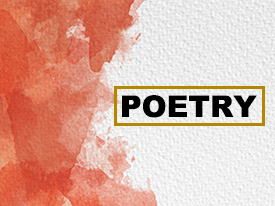
<style>
.page{position:relative;width:275px;height:206px}
.page>*{position:absolute;margin:0}
.t1{font:30px "Arial-Black";color:#000000}
</style>
<div class="page">
<p class="t1" style="left:122px;top:95px;width:135px;height:23px">POETRY</p>
</div>
